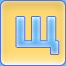
<style>
.page{position:relative;width:66px;height:66px}
.page>*{position:absolute;margin:0}
.t1{font:41px "Tahoma-Bold"}
</style>
<div class="page">
<p class="t1" style="left:15px;top:17px;width:43px;height:37px">Щ</p>
<p class="t1" style="left:16px;top:17px;width:43px;height:37px">Щ</p>
</div>
